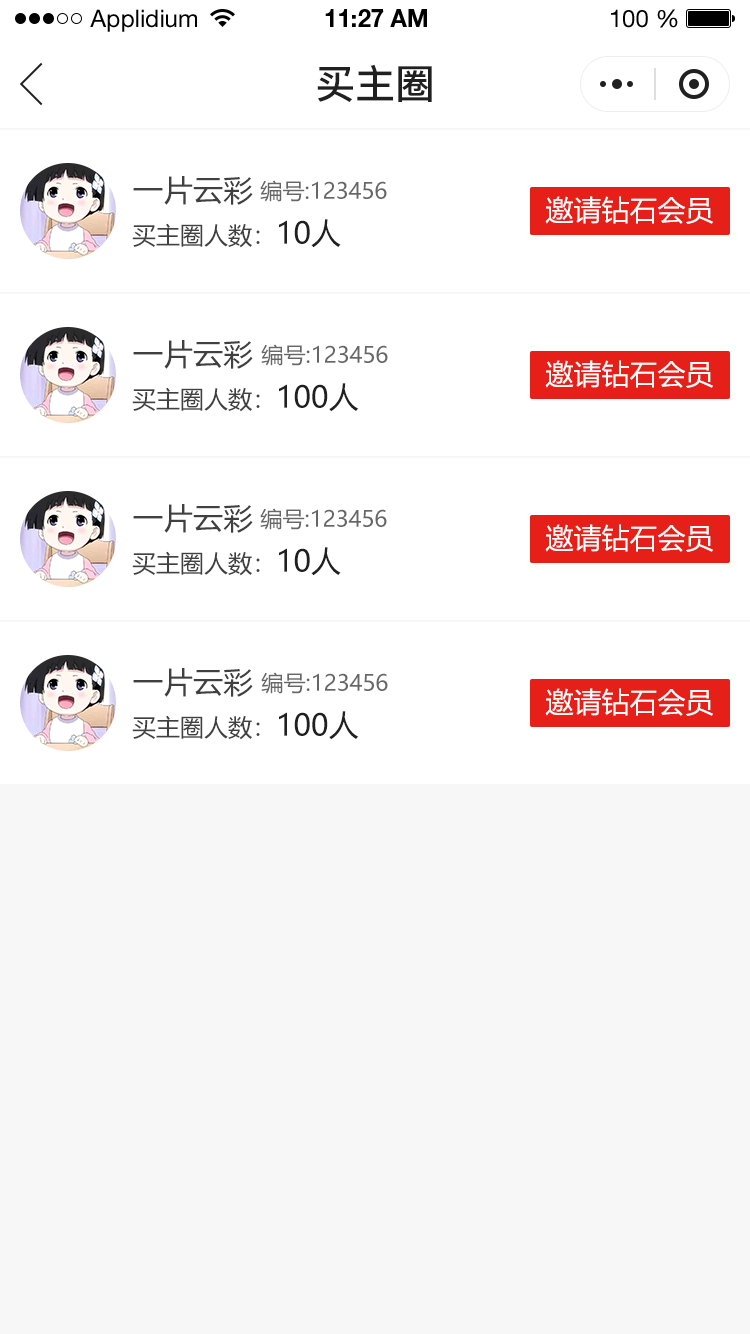
<style>
.page{position:relative;width:750px;height:1334px;background:#ffffff}
.page>*{position:absolute;margin:0}
.t1{font:24px "HelveticaNeueLTStd-Roman";color:#000000}
.t2{font:24px "HelveticaNeueLTStd-Bd";color:#000000}
.t3{font:40px "PingFang-SC-Bold";color:#202020;text-transform:uppercase}
.t4{font:30px "MicrosoftYaHei";color:#404040;text-transform:uppercase}
.t5{font:22px "MicrosoftYaHei";color:#666666;text-transform:uppercase}
.t6{font:28px "MicrosoftYaHei";color:#ffffff;text-transform:uppercase}
.t7{font:24px "MicrosoftYaHei";color:#404040;text-transform:uppercase}
.t8{font:30px "MicrosoftYaHei";color:#202020;text-transform:uppercase}
</style>
<div class="page">
<p class="t1" style="left:90px;top:9px;width:107px;height:23px">Applidium</p>
<p class="t2" style="left:325px;top:9px;width:102px;height:18px">11:27 AM</p>
<p class="t1" style="left:611px;top:9px;width:67px;height:19px">100 %</p>
<p class="t3" style="left:317px;top:64px;width:115px;height:38px">买主圈</p>
<p class="t4" style="left:133px;top:176px;width:120px;height:29px">一片云彩</p>
<p class="t5" style="left:260px;top:180px;width:127px;height:22px">编号:123456</p>
<p class="t6" style="left:545px;top:196px;width:168px;height:28px">邀请钻石会员</p>
<p class="t7" style="left:132px;top:219px;width:209px;height:29px">买主圈人数：<span class="t8">10人</span></p>
<p class="t4" style="left:133px;top:340px;width:120px;height:29px">一片云彩</p>
<p class="t5" style="left:261px;top:344px;width:127px;height:22px">编号:123456</p>
<p class="t6" style="left:545px;top:360px;width:168px;height:28px">邀请钻石会员</p>
<p class="t7" style="left:132px;top:383px;width:227px;height:29px">买主圈人数：<span class="t8">100人</span></p>
<p class="t4" style="left:133px;top:504px;width:120px;height:29px">一片云彩</p>
<p class="t5" style="left:260px;top:508px;width:127px;height:22px">编号:123456</p>
<p class="t6" style="left:545px;top:524px;width:168px;height:28px">邀请钻石会员</p>
<p class="t7" style="left:132px;top:547px;width:209px;height:29px">买主圈人数：<span class="t8">10人</span></p>
<p class="t4" style="left:133px;top:668px;width:120px;height:29px">一片云彩</p>
<p class="t5" style="left:261px;top:672px;width:127px;height:22px">编号:123456</p>
<p class="t6" style="left:545px;top:688px;width:168px;height:28px">邀请钻石会员</p>
<p class="t7" style="left:132px;top:711px;width:227px;height:29px">买主圈人数：<span class="t8">100人</span></p>
</div>
